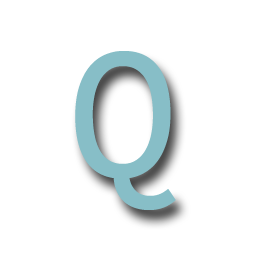
<style>
.page{position:relative;width:256px;height:256px;background:#ffffff}
.page>*{position:absolute;margin:0}
.t1{font:192px "Consolas";color:#87bec7}
</style>
<div class="page">
<p class="t1" style="left:75px;top:51px;width:101px;height:159px">Q</p>
</div>
